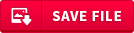
<style>
.page{position:relative;width:134px;height:33px}
.page>*{position:absolute;margin:0}
.t1{font:15px "SourceSansPro-Bold";letter-spacing:0.04em;color:#ffffff}
</style>
<div class="page">
<p class="t1" style="left:52px;top:11px;width:69px;height:10px">SAVE FILE</p>
</div>
